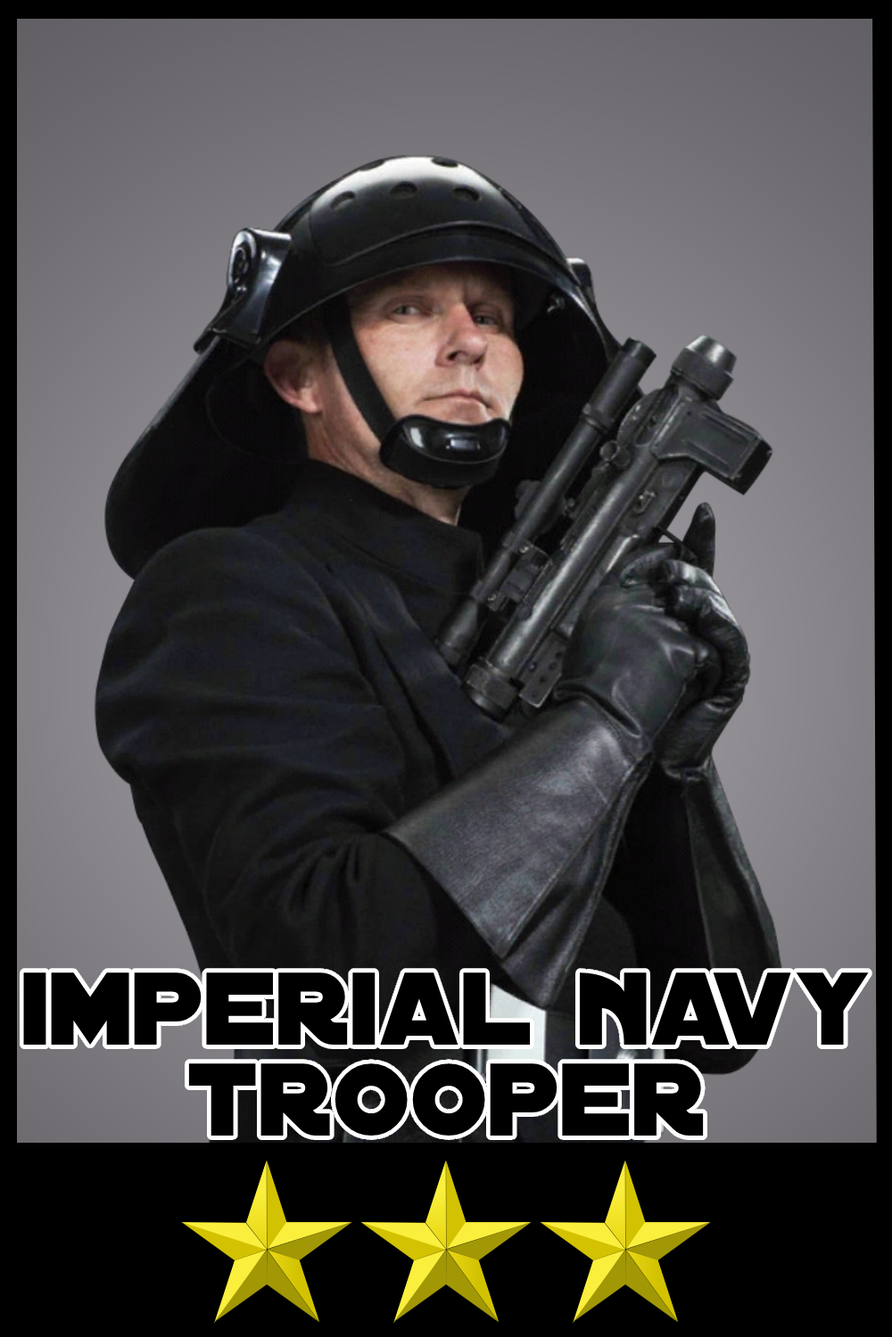
<style>
.page{position:relative;width:892px;height:1337px}
.page>*{position:absolute;margin:0}
.t1{font:110.7px/90.6px "DistantGalaxy";color:#000000}
</style>
<div class="page">
<p class="t1" style="left:23px;top:973px;width:845px;height:163px;text-align:center">imperial navy<br>trooper</p>
</div>
